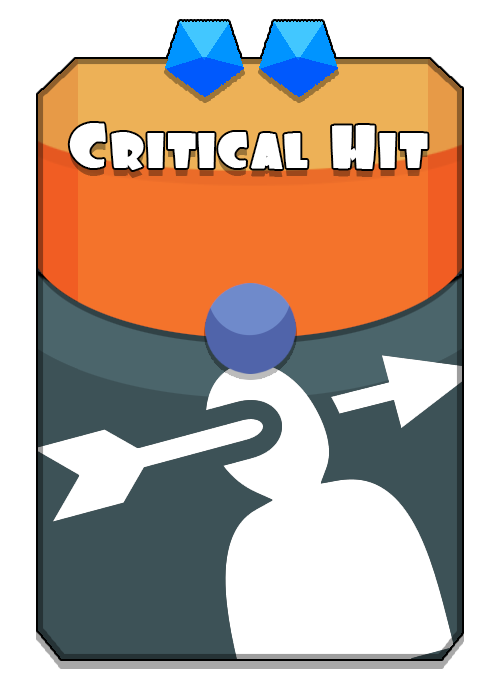
<style>
.page{position:relative;width:500px;height:698px;background:#ffffff}
.page>*{position:absolute;margin:0}
.t1{font:56px "Foo";color:#ffffff}
</style>
<div class="page">
<p class="t1" style="left:69px;top:123px;width:359px;height:47px">Critical Hit</p>
</div>
